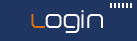
<style>
.page{position:relative;width:137px;height:41px;background:#1f3662}
.page>*{position:absolute;margin:0}
.t1{font:24px "Birdman";color:#ffffff}
.t2{font:24px "Birdman";color:#de7008}
</style>
<div class="page">
<p class="t1" style="left:31px;top:10px;width:72px;height:23px"><span class="t2">L</span>ogin</p>
</div>
